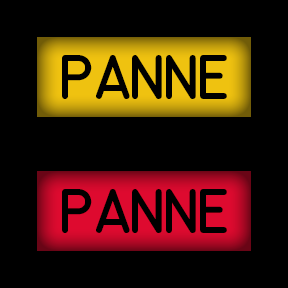
<style>
.page{position:relative;width:288px;height:288px;background:#000000}
.page>*{position:absolute;margin:0}
.t1{font:44px "MS-33558-Regular";letter-spacing:-0.04em;color:#000000}
</style>
<div class="page">
<p class="t1" style="left:62px;top:55px;width:165px;height:44px">PANNE</p>
<p class="t1" style="left:62px;top:189px;width:165px;height:44px">PANNE</p>
</div>
